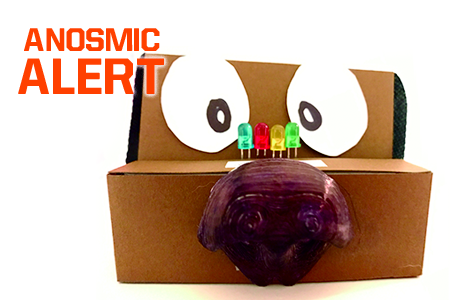
<style>
.page{position:relative;width:450px;height:300px;background:#ffffff}
.page>*{position:absolute;margin:0}
.t1{font:31px/43.1px "Allstar4";color:#ff4000}
.t2{font:48.5px/43.1px "Allstar4";color:#ff4000}
</style>
<div class="page">
<p class="t1" style="left:18px;top:28px;width:146px;height:66px;text-align:center">ANOSMIC<br><span class="t2">ALERT</span></p>
</div>
